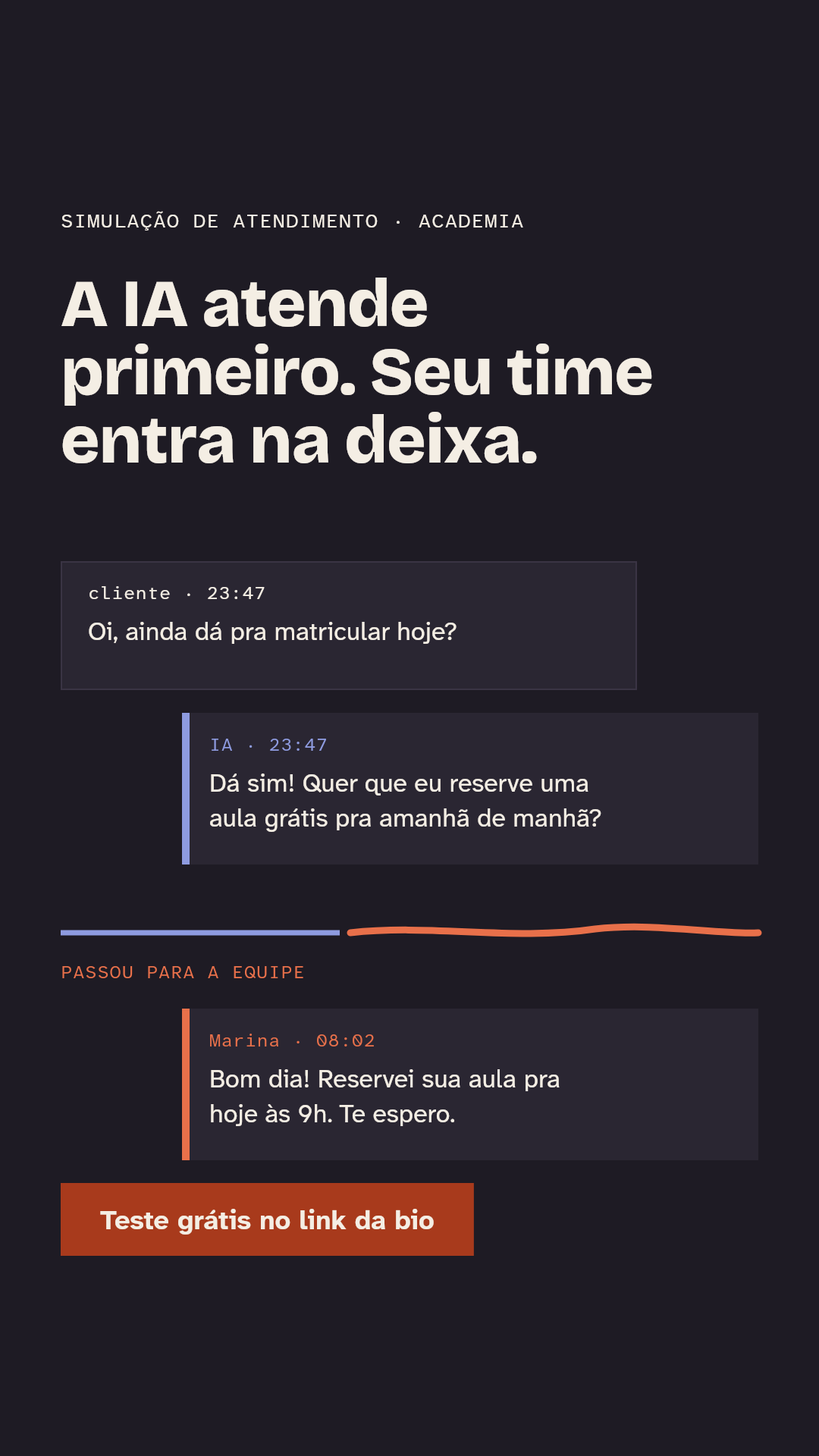
<style>
.page{position:relative;width:819px;height:1456px;background:#1e1b24}
.page>*{position:absolute;margin:0}
.t1{font:19.7px "AtkinsonHyperlegibleMono-Regular";letter-spacing:0.04em;color:#f4eee4}
.t2{font:66.7px/68.2px "BricolageGrotesque-ExtraBold";letter-spacing:-0.012em;color:#f4eee4}
.t3{font:18.2px "AtkinsonHyperlegibleMono-Regular";letter-spacing:0.02em;color:#f4eee4}
.t4{font:25.8px "AtkinsonHyperlegibleNext-Regular";color:#f4eee4}
.t5{font:18.2px "AtkinsonHyperlegibleMono-Regular";letter-spacing:0.02em;color:#8e9be0}
.t6{font:25.8px/34.9px "AtkinsonHyperlegibleNext-Regular";color:#f4eee4}
.t7{font:18.2px "AtkinsonHyperlegibleMono-Regular";letter-spacing:0.04em;color:#e8704a}
.t8{font:18.2px "AtkinsonHyperlegibleMono-Regular";letter-spacing:0.02em;color:#e8704a}
.t9{font:27.3px "AtkinsonHyperlegibleNext-Bold";color:#f4eee4}
</style>
<div class="page">
<p class="t1" style="left:61px;top:211px;width:462px;height:20px">SIMULAÇÃO DE ATENDIMENTO · ACADEMIA</p>
<p class="t2" style="left:61px;top:278px;width:591px;height:185px">A IA atende<br>primeiro. Seu time<br>entra na deixa.</p>
<p class="t3" style="left:89px;top:586px;width:176px;height:13px">cliente · 23:47</p>
<p class="t4" style="left:89px;top:622px;width:368px;height:22px">Oi, ainda dá pra matricular hoje?</p>
<p class="t5" style="left:212px;top:739px;width:114px;height:12px">IA · 23:47</p>
<p class="t6" style="left:210px;top:773px;width:391px;height:59px">Dá sim! Quer que eu reserve uma<br>aula grátis pra amanhã de manhã?</p>
<p class="t7" style="left:62px;top:966px;width:241px;height:12px">PASSOU PARA A EQUIPE</p>
<p class="t8" style="left:210px;top:1034px;width:164px;height:12px">Marina · 08:02</p>
<p class="t6" style="left:211px;top:1069px;width:349px;height:57px">Bom dia! Reservei sua aula pra<br>hoje às 9h. Te espero.</p>
<p class="t9" style="left:100px;top:1209px;width:334px;height:26px">Teste grátis no link da bio</p>
</div>
